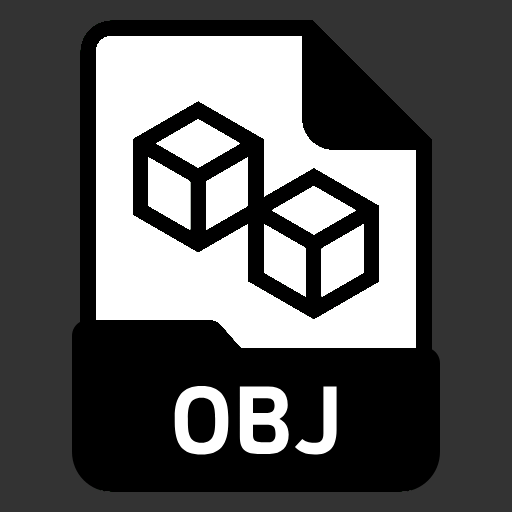
<style>
.page{position:relative;width:512px;height:512px;background:#333333}
.page>*{position:absolute;margin:0}
.t1{font:94.6px "Viga-Regular";color:#ffffff}
</style>
<div class="page">
<p class="t1" style="left:174px;top:386px;width:163px;height:69px">OBJ</p>
</div>
